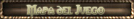
<style>
.page{position:relative;width:134px;height:19px}
.page>*{position:absolute;margin:0}
.t1{font:12px "Morpheus"}
</style>
<div class="page">
<p class="t1" style="left:26px;top:5px;width:79px;height:12px">Mapa del Juego</p>
</div>
